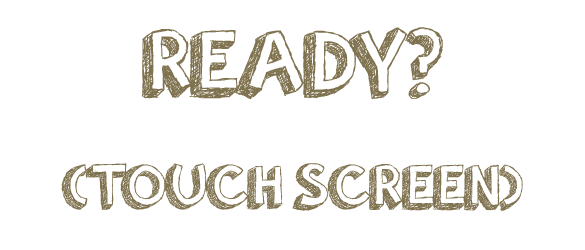
<style>
.page{position:relative;width:585px;height:250px;background:#ffffff}
.page>*{position:absolute;margin:0}
.t1{font:96px "orangejuice";color:#7f724f}
.t2{font:64px "orangejuice";color:#7f724f}
</style>
<div class="page">
<p class="t1" style="left:141px;top:27px;width:302px;height:73px">READY?</p>
<p class="t2" style="left:61px;top:162px;width:462px;height:50px">(TOUCH SCREEN)</p>
</div>
